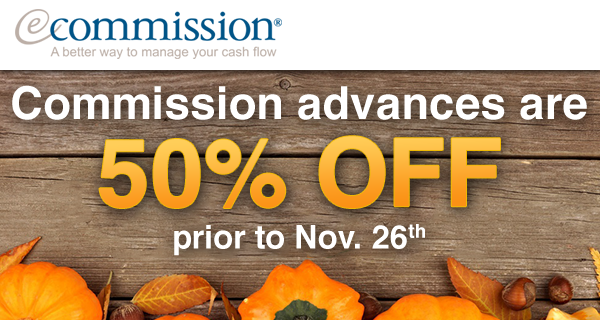
<style>
.page{position:relative;width:600px;height:320px;background:#ffffff}
.page>*{position:absolute;margin:0}
.t1{font:45.4px "Helvetica-Bold";color:#ffffff}
.t2{font:94.5px "Helvetica-Bold";text-transform:uppercase}
.t3{font:32.5px "Helvetica-Bold";color:#ffffff}
</style>
<div class="page">
<p class="t1" style="left:12px;top:85px;width:575px;height:35px">Commission advances are</p>
<p class="t2" style="left:99px;top:136px;width:401px;height:72px">50% Off</p>
<p class="t3" style="left:174px;top:224px;width:251px;height:32px">prior to Nov. 26th</p>
</div>
